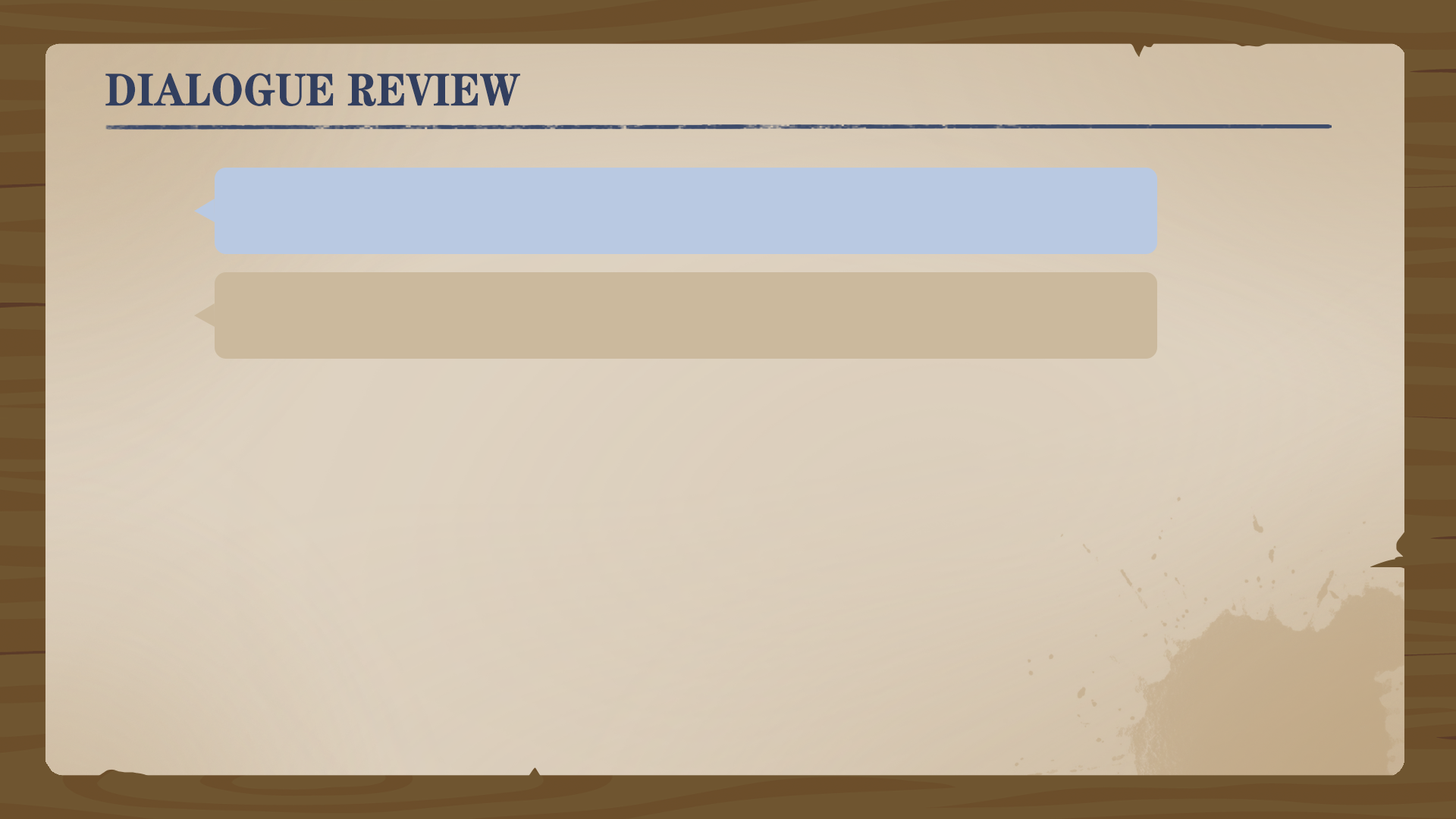
<style>
.page{position:relative;width:1456px;height:819px}
.page>*{position:absolute;margin:0}
.t1{font:46.2px "FZCHSJW--GB1-0";color:#323f5f;text-transform:uppercase;scale:0.9 1}
</style>
<div class="page">
<p class="t1" style="left:105px;top:73px;width:415px;height:33px">Dialogue Review</p>
</div>
